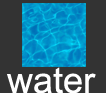
<style>
.page{position:relative;width:106px;height:93px;background:#333333}
.page>*{position:absolute;margin:0}
.t1{font:36px "ArialMT";color:#ffffff}
</style>
<div class="page">
<p class="t1" style="left:7px;top:67px;width:89px;height:27px">water</p>
</div>
